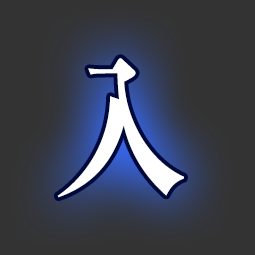
<style>
.page{position:relative;width:255px;height:255px;background:#333333}
.page>*{position:absolute;margin:0}
.t1{font:156px "RyuminPro-ExBold";letter-spacing:-0.08em;color:#ffffff;scale:0.88 1}
</style>
<div class="page">
<p class="t1" style="left:57px;top:58px;width:127px;height:140px">入</p>
</div>
